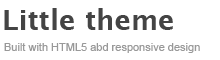
<style>
.page{position:relative;width:220px;height:60px;background:#ffffff}
.page>*{position:absolute;margin:0}
.t1{font:28px "LucidaGrande-Bold";color:#444444}
.t2{font:11px "ArialMT";color:#999999}
</style>
<div class="page">
<p class="t1" style="left:4px;top:8px;width:169px;height:22px">Little theme</p>
<p class="t2" style="left:4px;top:43px;width:196px;height:10px">Built with HTML5 abd responsive design</p>
</div>
